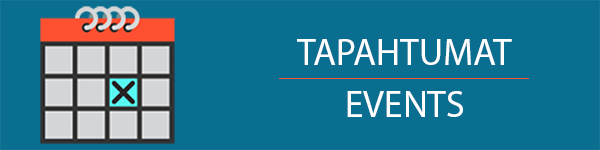
<style>
.page{position:relative;width:600px;height:150px;background:#096e90}
.page>*{position:absolute;margin:0}
.t1{font:37.5px "MyriadPro-Regular";color:#ffffff;text-transform:uppercase}
</style>
<div class="page">
<p class="t1" style="left:297px;top:39px;width:215px;height:26px">TAPAHTUMAT</p>
<p class="t1" style="left:347px;top:91px;width:116px;height:26px">EVENTS</p>
</div>
